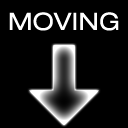
<style>
.page{position:relative;width:128px;height:128px;background:#000000}
.page>*{position:absolute;margin:0}
.t1{font:24px "HelveticaNeueLTStd-Ex";letter-spacing:0.01em;color:#ffffff}
</style>
<div class="page">
<p class="t1" style="left:9px;top:12px;width:110px;height:19px">MOVING</p>
</div>
